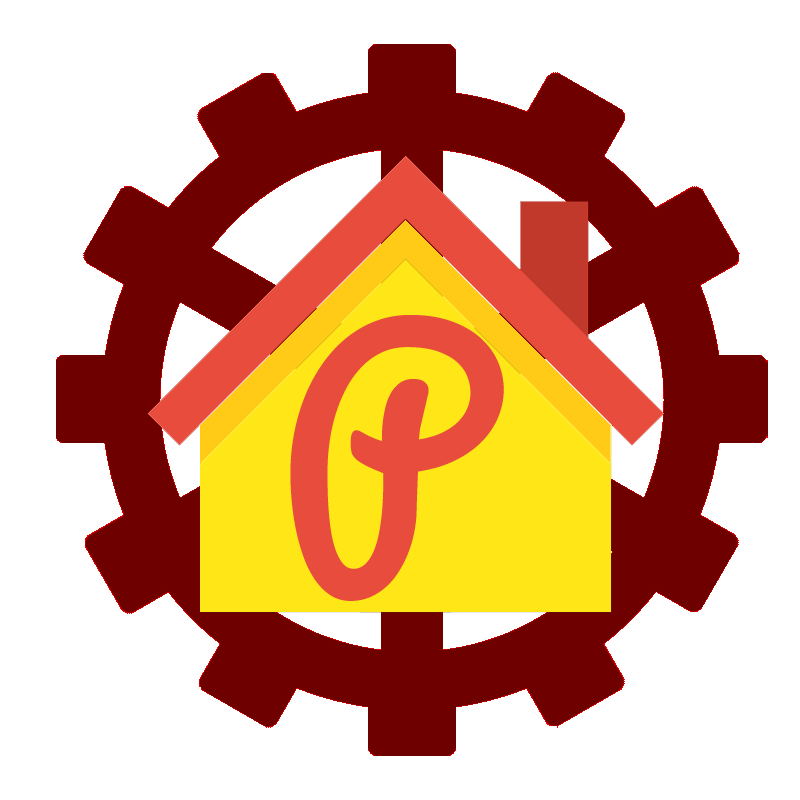
<style>
.page{position:relative;width:800px;height:800px;background:#ffffff}
.page>*{position:absolute;margin:0}
.t1{font:281.9px "Pacifico";color:#e74c3c}
</style>
<div class="page">
<p class="t1" style="left:290px;top:315px;width:214px;height:286px">P</p>
</div>
